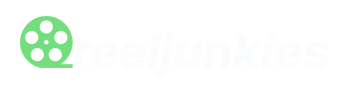
<style>
.page{position:relative;width:350px;height:100px;background:#ffffff}
.page>*{position:absolute;margin:0}
.t1{font:47px "Inter-ExtraBoldItalic";color:#fafcfe}
</style>
<div class="page">
<p class="t1" style="left:72px;top:31px;width:257px;height:47px">reeljunkies</p>
</div>
